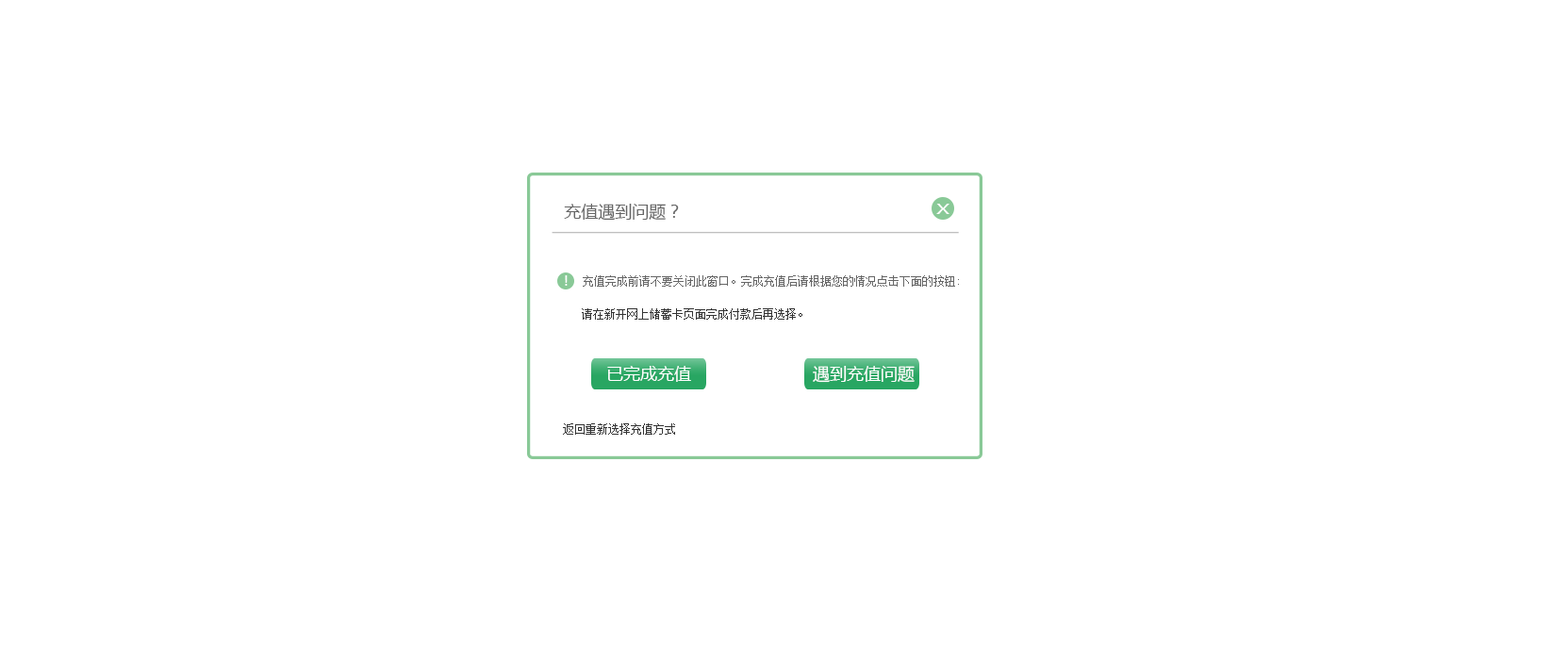
<style>
.page{position:relative;width:1568px;height:660px;background:#ffffff}
.page>*{position:absolute;margin:0}
.t1{font:17px "MicrosoftYaHei";color:#666666}
.t2{font:14.4px "MicrosoftYaHei";color:#ffffff;scale:1.42 1}
.t3{font:12.7px "MicrosoftYaHei";color:#ffffff}
.t4{font:11.3px "SimSun";color:#666666}
.t5{font:11.3px "SimSun";color:#333333}
.t6{font:17px "MicrosoftYaHei";color:#ffffff}
</style>
<div class="page">
<p class="t1" style="left:564px;top:204px;width:115px;height:17px">充值遇到问题？</p>
<p class="t2" style="left:936px;top:204px;width:13px;height:10px">X</p>
<p class="t3" style="left:565px;top:275px;width:3px;height:11px">!</p>
<p class="t4" style="left:583px;top:275px;width:376px;height:12px">充值完成前请不要关闭此窗口。完成充值后请根据您的情况点击下面的按钮:</p>
<p class="t5" style="left:582px;top:308px;width:220px;height:12px">请在新开网上储蓄卡页面完成付款后再选择。</p>
<p class="t6" style="left:607px;top:366px;width:84px;height:16px">已完成充值</p>
<p class="t6" style="left:813px;top:366px;width:102px;height:17px">遇到充值问题</p>
<p class="t5" style="left:563px;top:423px;width:112px;height:12px">返回重新选择充值方式</p>
</div>
